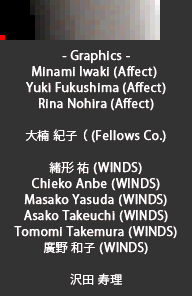
<style>
.page{position:relative;width:192px;height:296px;background:#333333}
.page>*{position:absolute;margin:0}
.t1{font:12px/16px "KozGoPr6N-Regular";letter-spacing:0.025em;color:#ffffff;font-weight:bold}
.t2{font:12px/16px "KozGoPr6N-Regular";letter-spacing:0.025em;color:#ffffff}
</style>
<div class="page">
<p class="t1" style="left:14px;top:50px;width:163px;height:235px;text-align:center">- Graphics -<br>Minami Iwaki (Affect) <br>Yuki Fukushima (Affect)<br>Rina Nohira (Affect)<br><br><span class="t2">大楠 紀子</span> （ (Fellows Co.)<br><br><span class="t2">緒形 祐</span> (WINDS)<br>Chieko Anbe (WINDS)<br>Masako Yasuda (WINDS)<br>Asako Takeuchi (WINDS)<br>Tomomi Takemura (WINDS)<br><span class="t2">廣野 和子</span> (WINDS)<br><span class="t2"><br>沢田 寿理</span></p>
</div>
